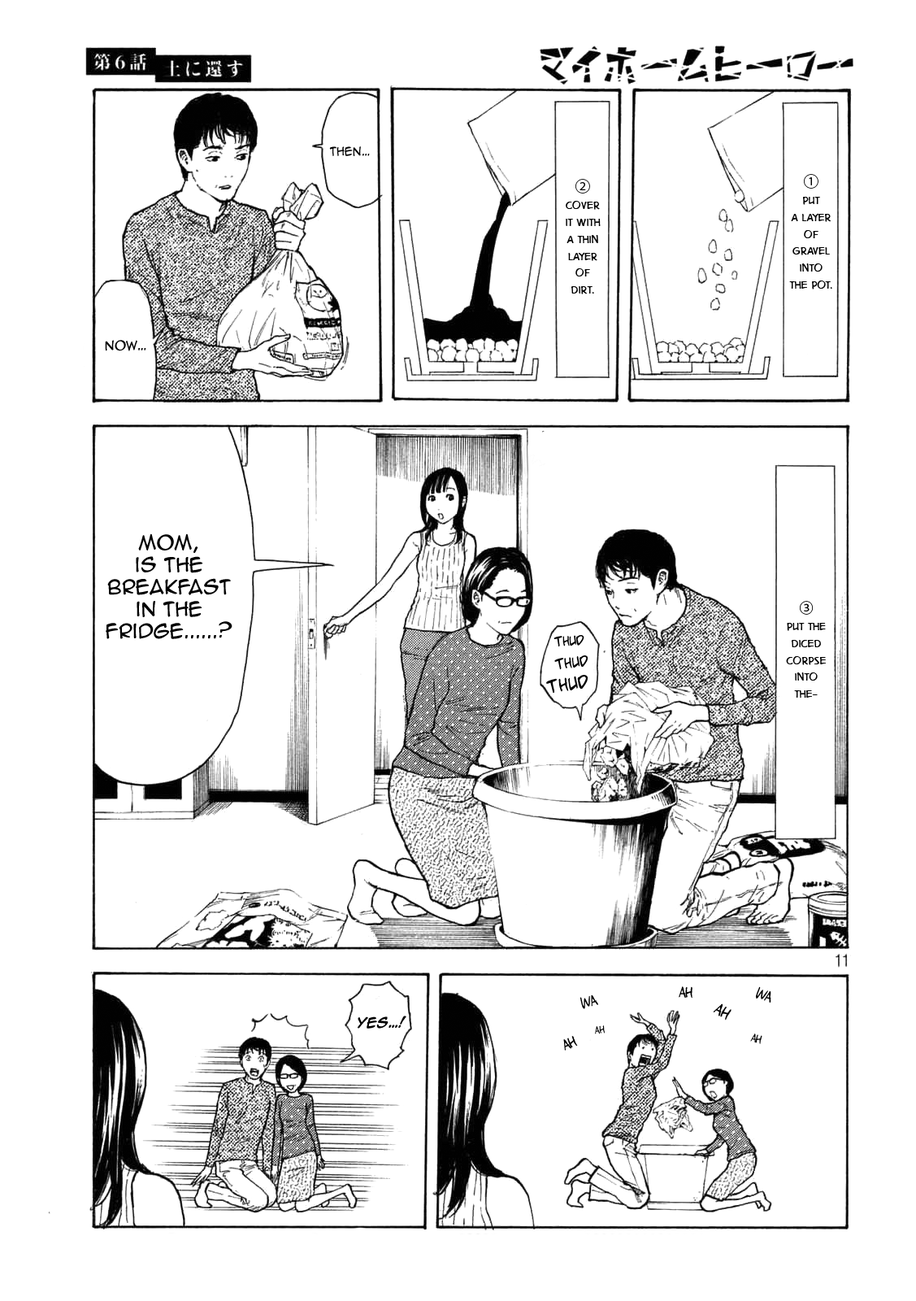
<style>
.page{position:relative;width:916px;height:1301px;background:#ffffff}
.page>*{position:absolute;margin:0}
.t1{font:10.8px "AnimeAce2.0BB";color:#000000}
.t2{font:14.1px "DigitalStrip.BB";color:#000000}
.t3{font:15.2px "KozGoPr6N-Regular";color:#000000}
.t4{font:11.9px "AnimeAce2.0BB";color:#000000}
.t5{font:18.4px "AnimeAce2.0BB";color:#000000}
.t6{font:14.1px "KozGoPr6N-Regular";color:#000000}
.t7{font:13px "AdamWarrenpro";color:#000000;scale:0.97 1}
.t8{font:14.1px "AdamWarrenpro";color:#000000;scale:0.97 1}
.t9{font:17.4px "AdamWarrenpro";color:#000000;scale:0.97 1}
.t10{font:14.1px "AdamWarrenpro";color:#000000}
.t11{font:15.2px "AdamWarrenpro";color:#000000}
.t12{font:11.9px "AnimeAce2.0BB-Bold";color:#000000}
.t13{font:9.8px "AdamWarrenpro";color:#000000}
.t14{font:10.8px "AdamWarrenpro";color:#000000}
</style>
<div class="page">
<p class="t1" style="left:329px;top:146px;width:41px;height:10px">then…</p>
<p class="t2" style="left:566px;top:179px;width:35px;height:115px;text-align:center"><span class="t3">② </span>Cover it with a thin layer of dirt.</p>
<p class="t2" style="left:790px;top:174px;width:43px;height:115px;text-align:center"><span class="t3">① </span>Put <br>a layer of gravel into <br>the pot.</p>
<p class="t4" style="left:105px;top:340px;width:41px;height:11px">Now…</p>
<p class="t5" style="left:106px;top:533px;width:127px;height:106px;text-align:center">Mom, <br>is the breakfast <br>in the fridge......?</p>
<p class="t2" style="left:786px;top:601px;width:40px;height:97px;text-align:center"><span class="t6">③<br></span>Put the diced corpse into the-</p>
<p class="t7" style="left:554px;top:635px;width:31px;height:11px;rotate:-3deg">thud</p>
<p class="t8" style="left:555px;top:655px;width:33px;height:15px;rotate:-7deg">thud</p>
<p class="t9" style="left:546px;top:674px;width:42px;height:19px;rotate:-8deg">thud</p>
<p class="t10" style="left:679px;top:986px;width:14px;height:13px;rotate:2deg">ah</p>
<p class="t10" style="left:756px;top:986px;width:16px;height:17px;rotate:17deg">Wa</p>
<p class="t10" style="left:580px;top:995px;width:19px;height:14px;rotate:-17deg">Wa</p>
<p class="t11" style="left:713px;top:1003px;width:19px;height:18px;rotate:32deg">ah</p>
<p class="t12" style="left:358px;top:1016px;width:49px;height:13px">Yes…!</p>
<p class="t13" style="left:595px;top:1025px;width:10px;height:9px;rotate:-6deg">ah</p>
<p class="t10" style="left:564px;top:1036px;width:14px;height:15px;rotate:-22deg">ah</p>
<p class="t14" style="left:751px;top:1034px;width:12px;height:10px;rotate:14deg">ah</p>
</div>
